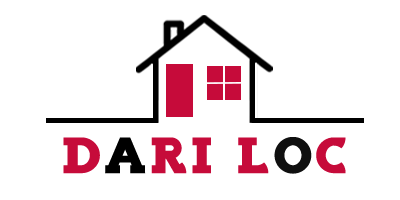
<style>
.page{position:relative;width:400px;height:200px;background:#ffffff}
.page>*{position:absolute;margin:0}
.t1{font:45.9px "Fela";letter-spacing:0.075em;color:#c60b3a}
.t2{font:45.9px "Fela";letter-spacing:0.075em;color:#000000}
.t3{font:45.9px "Fela";letter-spacing:0.075em;color:#0f0f0f}
</style>
<div class="page">
<p class="t1" style="left:63px;top:137px;width:283px;height:37px">D<span class="t2">A</span>RI L<span class="t3">O</span>C</p>
</div>
